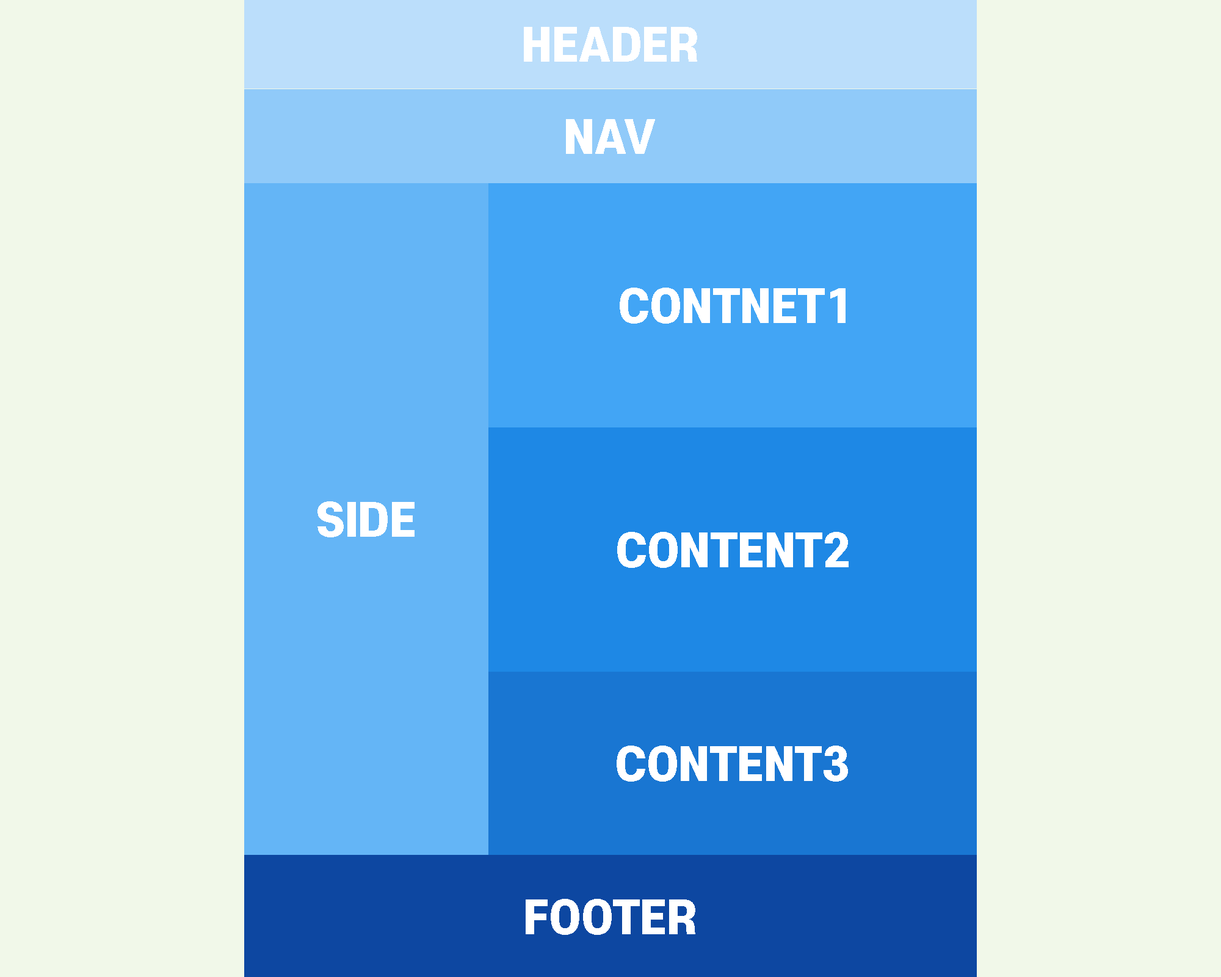
<style>
.page{position:relative;width:1221px;height:977px;background:#f1f8e9}
.page>*{position:absolute;margin:0}
.t1{font:44px "S-CoreDream-8Heavy";color:#ffffff}
</style>
<div class="page">
<p class="t1" style="left:524px;top:27px;width:173px;height:35px">HEADER</p>
<p class="t1" style="left:566px;top:119px;width:89px;height:35px">NAV</p>
<p class="t1" style="left:620px;top:288px;width:225px;height:36px">CONTNET1</p>
<p class="t1" style="left:317px;top:501px;width:97px;height:36px">SIDE</p>
<p class="t1" style="left:617px;top:532px;width:232px;height:36px">CONTENT2</p>
<p class="t1" style="left:617px;top:745px;width:231px;height:36px">CONTENT3</p>
<p class="t1" style="left:526px;top:899px;width:169px;height:36px">FOOTER</p>
</div>
